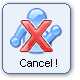
<style>
.page{position:relative;width:80px;height:80px;background:#ebf1fa}
.page>*{position:absolute;margin:0}
.t1{font:10.7px "ArialMT";color:#000000}
</style>
<div class="page">
<p class="t1" style="left:20px;top:59px;width:37px;height:8px">Cancel !</p>
</div>
